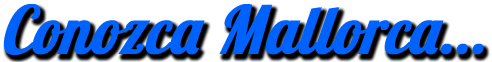
<style>
.page{position:relative;width:492px;height:62px;background:#ffffff}
.page>*{position:absolute;margin:0}
.t1{font:66.8px "LobsterTwo-BoldItalic";color:#0062fc;font-weight:bold;font-style:italic;scale:0.88 1}
</style>
<div class="page">
<p class="t1" style="left:2px;top:3px;width:482px;height:53px">Conozca Mallorca...</p>
</div>
